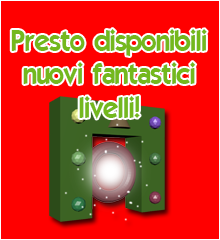
<style>
.page{position:relative;width:220px;height:240px;background:#ff0000}
.page>*{position:absolute;margin:0}
.t1{font:28px "ELEGANCE";color:#74b81d}
</style>
<div class="page">
<p class="t1" style="left:11px;top:29px;width:196px;height:90px;text-align:center">Presto disponibili<br>nuovi fantastici<br>livelli!</p>
</div>
